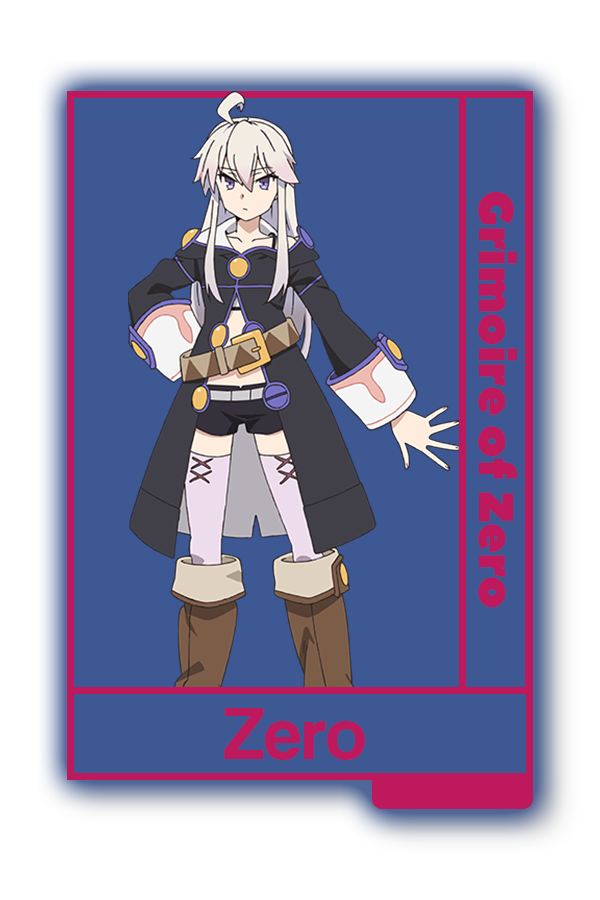
<style>
.page{position:relative;width:600px;height:900px;background:#3d5892}
.page>*{position:absolute;margin:0}
.t1{font:48.8px "PeaceSans";color:#bf195e}
.t2{font:75px "CoolveticaRg-Regular";color:#bf195e}
</style>
<div class="page">
<p class="t1" style="left:478px;top:192px;width:39px;height:416px;rotate:90deg">Grimoire of Zero</p>
<p class="t2" style="left:224px;top:708px;width:141px;height:52px">Zero</p>
</div>
